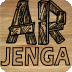
<style>
.page{position:relative;width:72px;height:72px}
.page>*{position:absolute;margin:0}
.t1{font:54.2px "AlphaWood";color:#000000}
.t2{font:27.3px "ErasITC-Bold";scale:0.71 1}
</style>
<div class="page">
<p class="t1" style="left:5px;top:0px;width:62px;height:46px">AR</p>
<p class="t2" style="left:0px;top:46px;width:71px;height:20px">JENGA</p>
</div>
